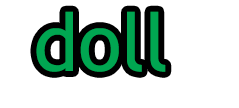
<style>
.page{position:relative;width:239px;height:108px;background:#ffffff}
.page>*{position:absolute;margin:0}
.t1{font:80px "TrebuchetMS";color:#00a651}
</style>
<div class="page">
<p class="t1" style="left:36px;top:11px;width:130px;height:61px">doll</p>
</div>
